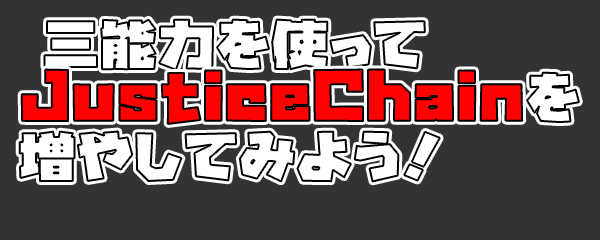
<style>
.page{position:relative;width:600px;height:240px;background:#333333}
.page>*{position:absolute;margin:0}
.t1{font:50px "GN-KMBFont-UB-OldstyleKana";letter-spacing:0.05em;color:#ffffff;scale:1.1 1}
.t2{font:55px "GN-KMBFont-UB-OldstyleKana";letter-spacing:0.05em;color:#ff0000;scale:1.1 1}
</style>
<div class="page">
<p class="t1" style="left:44px;top:19px;width:381px;height:51px">三能力を使って</p>
<p class="t2" style="left:21px;top:69px;width:558px;height:55px">JusticeChain<span class="t1">を</span></p>
<p class="t1" style="left:19px;top:131px;width:421px;height:51px">増やしてみよう！</p>
</div>
